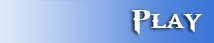
<style>
.page{position:relative;width:214px;height:43px}
.page>*{position:absolute;margin:0}
.t1{font:28px "GodOfWar";color:#ffffff}
</style>
<div class="page">
<p class="t1" style="left:132px;top:10px;width:70px;height:24px">Play</p>
</div>
